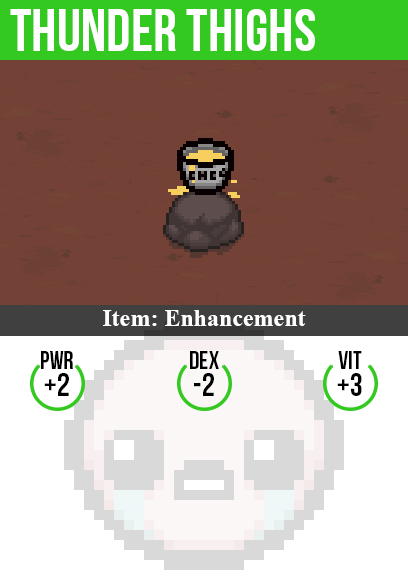
<style>
.page{position:relative;width:408px;height:585px;background:#734136}
.page>*{position:absolute;margin:0}
.t1{font:60px "BebasNeue";color:#ffffff}
.t2{font:24px "TimesNewRomanPS-BoldMT";color:#ffffff}
.t3{font:25px "BebasNeue";color:#000000}
.t4{font:32px "BebasNeue";color:#000000}
</style>
<div class="page">
<p class="t1" style="left:10px;top:9px;width:305px;height:42px">thunder thighs</p>
<p class="t2" style="left:103px;top:310px;width:203px;height:16px">Item: Enhancement</p>
<p class="t3" style="left:41px;top:351px;width:32px;height:18px">pwr</p>
<p class="t3" style="left:190px;top:351px;width:29px;height:18px">dex</p>
<p class="t3" style="left:338px;top:351px;width:24px;height:18px">vit</p>
<p class="t4" style="left:44px;top:373px;width:25px;height:23px">+2</p>
<p class="t4" style="left:194px;top:373px;width:20px;height:23px">-2</p>
<p class="t4" style="left:337px;top:373px;width:25px;height:23px">+3</p>
</div>
